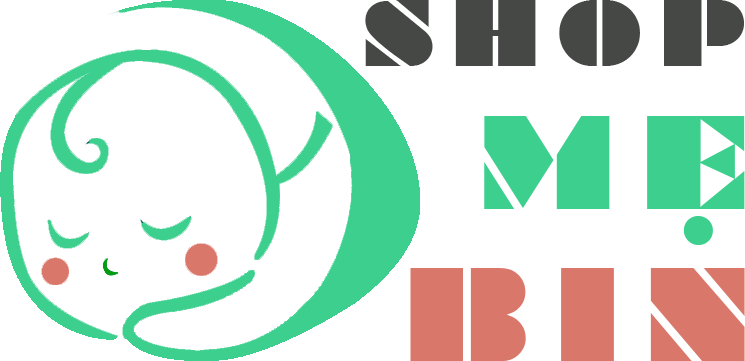
<style>
.page{position:relative;width:745px;height:361px;background:#ffffff}
.page>*{position:absolute;margin:0}
.t1{font:85px "Braggadocio";letter-spacing:0.2em;color:#464846;text-transform:uppercase}
.t2{font:120px "Braggadocio";letter-spacing:0.2em;color:#da776b;text-transform:uppercase}
</style>
<div class="page">
<p class="t1" style="left:365px;top:0px;width:379px;height:66px">shop</p>
<p class="t2" style="left:410px;top:268px;width:335px;height:93px">bin</p>
</div>
